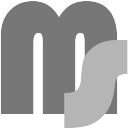
<style>
.page{position:relative;width:128px;height:128px;background:#777777}
.page>*{position:absolute;margin:0}
.t1{font:165px "Bauhaus93";color:#777777}
.t2{font:180px "Bauhaus93";color:#b6b6b6}
</style>
<div class="page">
<p class="t1" style="left:0px;top:1px;width:118px;height:113px">M</p>
<p class="t2" style="left:64px;top:40px;width:64px;height:88px">s</p>
</div>
